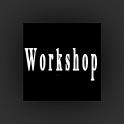
<style>
.page{position:relative;width:124px;height:124px;background:#000000}
.page>*{position:absolute;margin:0}
.t1{font:34.7px "BellMTBold";letter-spacing:0.235em;color:#fbfbfb;font-weight:bold;scale:0.32 1}
</style>
<div class="page">
<p class="t1" style="left:24px;top:48px;width:73px;height:33px">Workshop</p>
</div>
